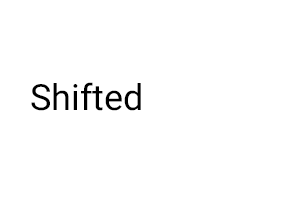
<style>
.page{position:relative;width:300px;height:200px;background:#ffffff}
.page>*{position:absolute;margin:0}
.t1{font:36px "Roboto-Regular";color:#000000}
</style>
<div class="page">
<p class="t1" style="left:31px;top:82px;width:110px;height:29px">Shifted</p>
</div>
